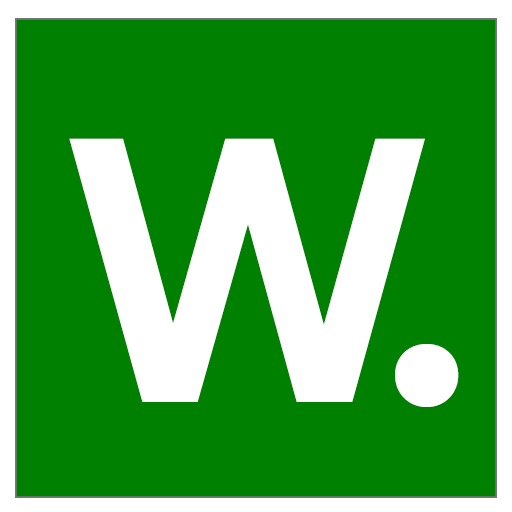
<style>
.page{position:relative;width:512px;height:512px;background:#008000}
.page>*{position:absolute;margin:0}
.t1{font:375.9px "Montserrat-Bold";letter-spacing:0.01em;color:#ffffff;scale:0.84 1}
.t2{font:324.6px "Montserrat-Bold";letter-spacing:0.01em;color:#ffffff}
</style>
<div class="page">
<p class="t1" style="left:69px;top:138px;width:356px;height:264px">W</p>
<p class="t2" style="left:395px;top:344px;width:64px;height:63px">.</p>
</div>
